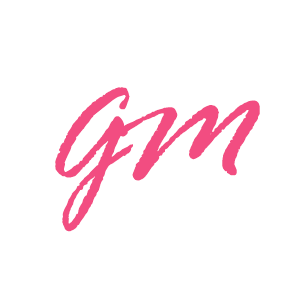
<style>
.page{position:relative;width:300px;height:300px;background:#ffffff}
.page>*{position:absolute;margin:0}
.t1{font:150px "RageItalic";letter-spacing:-0.05em;color:#f24d81}
</style>
<div class="page">
<p class="t1" style="left:55px;top:87px;width:205px;height:145px">GM</p>
</div>
